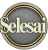
<style>
.page{position:relative;width:48px;height:50px;background:#ffffff}
.page>*{position:absolute;margin:0}
.t1{font:20px "RyuminPro-ExHeavy";letter-spacing:-0.08em;color:#eaedc8;scale:0.85 1}
</style>
<div class="page">
<p class="t1" style="left:0px;top:17px;width:47px;height:16px">Selesai</p>
</div>
